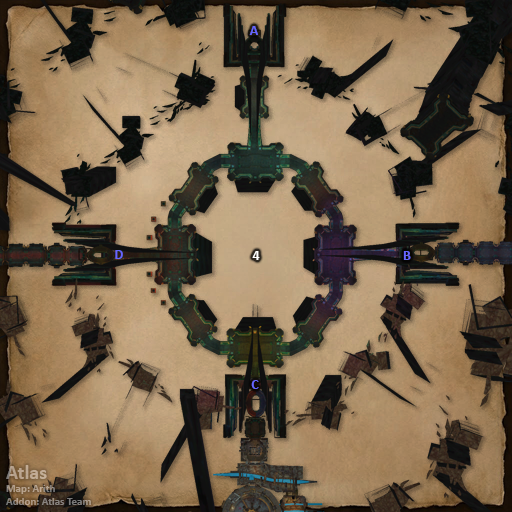
<style>
.page{position:relative;width:512px;height:512px}
.page>*{position:absolute;margin:0}
.t1{font:14px "Calibri-Bold";color:#6666ff}
.t2{font:14px "Calibri-Bold";color:#ffffff}
.t3{font:11px "Calibri-Bold"}
.t4{font:20px "Calibri-Bold"}
</style>
<div class="page">
<p class="t1" style="left:249px;top:26px;width:9px;height:9px">A</p>
<p class="t1" style="left:115px;top:250px;width:8px;height:9px">D</p>
<p class="t2" style="left:252px;top:251px;width:8px;height:9px">4</p>
<p class="t1" style="left:403px;top:251px;width:8px;height:9px">B</p>
<p class="t1" style="left:251px;top:380px;width:8px;height:9px">C</p>
<p class="t3" style="left:6px;top:465px;width:85px;height:40px"><span class="t4">Atlas<br></span>Map: Arith<br>Addon: Atlas Team</p>
</div>
